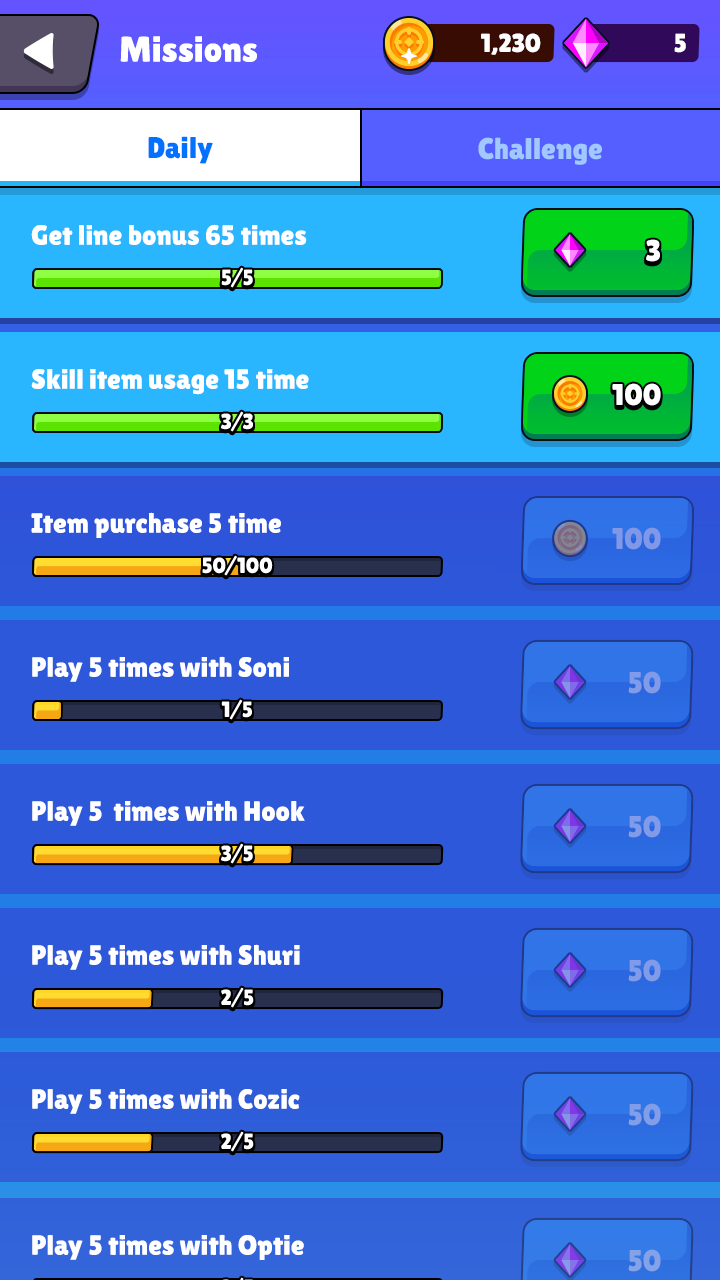
<style>
.page{position:relative;width:720px;height:1280px}
.page>*{position:absolute;margin:0}
.t1{font:36px "LilitaOne";color:#ffffff}
.t2{font:26px "LilitaOne";letter-spacing:-0.01em;color:#ffffff;text-transform:uppercase}
.t3{font:30px "LilitaOne";color:#0072ff}
.t4{font:30px "LilitaOne";color:#a1c9ff}
.t5{font:28px "LilitaOne";color:#ffffff}
.t6{font:30px "LilitaOne";color:#ffffff;text-transform:uppercase}
.t7{font:22px "LilitaOne";color:#ffffff;text-transform:uppercase}
.t8{font:30px "LilitaOne";color:#8198e8}
.t9{font:30px "LilitaOne";color:#819be8}
.t10{font:30px "LilitaOne";color:#829ee8}
.t11{font:30px "LilitaOne";color:#85a2e8}
</style>
<div class="page">
<p class="t1" style="left:120px;top:36px;width:137px;height:26px">Missions</p>
<p class="t2" style="left:481px;top:33px;width:60px;height:22px">1,230</p>
<p class="t2" style="left:674px;top:33px;width:12px;height:20px">5</p>
<p class="t3" style="left:148px;top:136px;width:65px;height:28px">Daily</p>
<p class="t4" style="left:478px;top:137px;width:124px;height:28px">Challenge</p>
<p class="t5" style="left:31px;top:224px;width:276px;height:21px">Get line bonus 65 times</p>
<p class="t6" style="left:646px;top:239px;width:14px;height:23px">3</p>
<p class="t7" style="left:221px;top:267px;width:32px;height:21px">5/5</p>
<p class="t5" style="left:31px;top:369px;width:278px;height:26px">Skill item usage 15 time</p>
<p class="t6" style="left:612px;top:383px;width:49px;height:23px">100</p>
<p class="t7" style="left:221px;top:411px;width:32px;height:21px">3/3</p>
<p class="t5" style="left:31px;top:512px;width:250px;height:26px">Item purchase 5 time</p>
<p class="t8" style="left:612px;top:527px;width:49px;height:23px">100</p>
<p class="t7" style="left:202px;top:555px;width:71px;height:21px">50/100</p>
<p class="t5" style="left:32px;top:656px;width:257px;height:26px">Play 5 times with Soni</p>
<p class="t9" style="left:628px;top:671px;width:33px;height:23px">50</p>
<p class="t7" style="left:221px;top:699px;width:31px;height:21px">1/5</p>
<p class="t5" style="left:32px;top:800px;width:273px;height:26px">Play 5  times with Hook</p>
<p class="t9" style="left:628px;top:815px;width:33px;height:23px">50</p>
<p class="t7" style="left:221px;top:843px;width:32px;height:21px">3/5</p>
<p class="t5" style="left:32px;top:944px;width:268px;height:26px">Play 5 times with Shuri</p>
<p class="t9" style="left:628px;top:959px;width:33px;height:23px">50</p>
<p class="t7" style="left:221px;top:987px;width:33px;height:21px">2/5</p>
<p class="t5" style="left:32px;top:1088px;width:268px;height:26px">Play 5 times with Cozic</p>
<p class="t10" style="left:628px;top:1103px;width:33px;height:23px">50</p>
<p class="t7" style="left:221px;top:1131px;width:33px;height:21px">2/5</p>
<p class="t5" style="left:32px;top:1234px;width:272px;height:26px">Play 5 times with Optie</p>
<p class="t11" style="left:628px;top:1249px;width:33px;height:23px">50</p>
</div>
